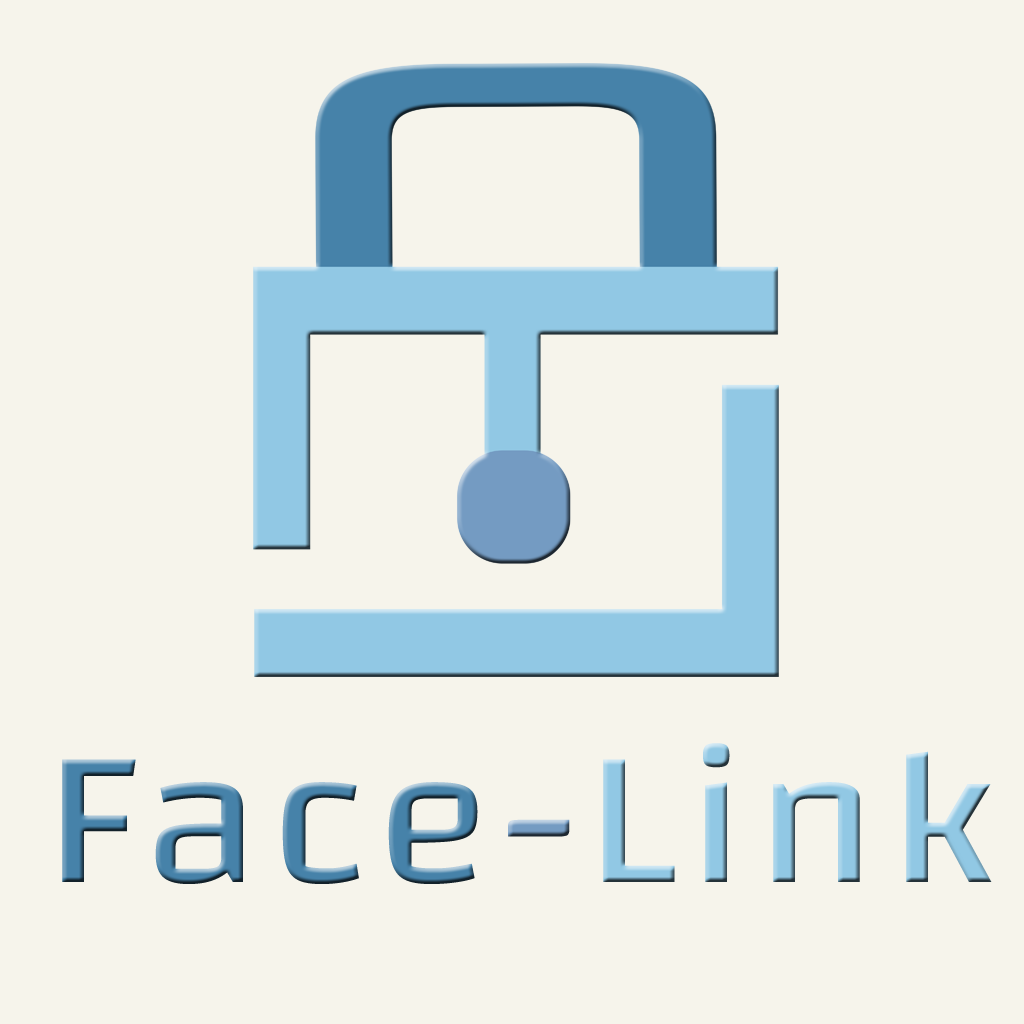
<style>
.page{position:relative;width:1024px;height:1024px;background:#f6f4eb}
.page>*{position:absolute;margin:0}
.t1{font:195.7px "Changa-Regular";letter-spacing:0.04em;color:#4682a9;scale:1.1 1}
.t2{font:195.7px "Changa-Regular";letter-spacing:0.04em;color:#749bc2;scale:1.1 1}
.t3{font:195.7px "Changa-Regular";letter-spacing:0.04em;color:#91c8e4;scale:1.1 1}
</style>
<div class="page">
<p class="t1" style="left:62px;top:743px;width:930px;height:141px">Face<span class="t2">-</span><span class="t3">Link</span></p>
</div>
